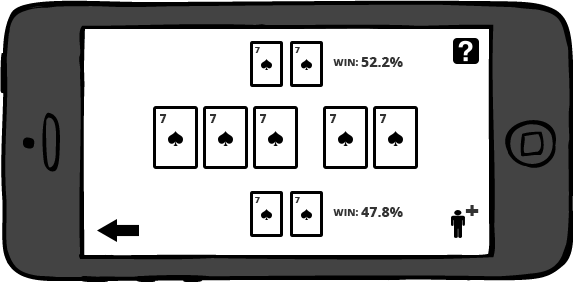
<style>
.page{position:relative;width:573px;height:282px;background:#ffffff}
.page>*{position:absolute;margin:0}
.t1{font:8.8px "OpenSans-Extrabold";color:#333333;text-transform:uppercase}
.t2{font:14px "OpenSans-Extrabold";color:#333333;text-transform:uppercase}
.t3{font:10px "OpenSans-Extrabold";color:#333333;text-transform:uppercase}
.t4{font:12px "OpenSans-Extrabold";color:#333333;text-transform:uppercase}
.t5{font:25.5px "OpenSans-Extrabold";color:#333333;text-transform:uppercase;scale:0.97 1}
</style>
<div class="page">
<p class="t1" style="left:255px;top:47px;width:5px;height:6px">7</p>
<p class="t1" style="left:295px;top:47px;width:5px;height:6px">7</p>
<p class="t2" style="left:333px;top:57px;width:70px;height:10px"><span class="t3">Win: </span>52.2%</p>
<p class="t4" style="left:160px;top:114px;width:7px;height:9px">7</p>
<p class="t4" style="left:210px;top:114px;width:7px;height:9px">7</p>
<p class="t4" style="left:260px;top:114px;width:7px;height:9px">7</p>
<p class="t4" style="left:330px;top:114px;width:7px;height:9px">7</p>
<p class="t4" style="left:380px;top:114px;width:7px;height:9px">7</p>
<p class="t1" style="left:255px;top:197px;width:5px;height:6px">7</p>
<p class="t1" style="left:295px;top:197px;width:5px;height:6px">7</p>
<p class="t2" style="left:333px;top:207px;width:70px;height:10px"><span class="t3">Win: </span>47.8%</p>
<p class="t5" style="left:465px;top:205px;width:14px;height:11px">+</p>
</div>
